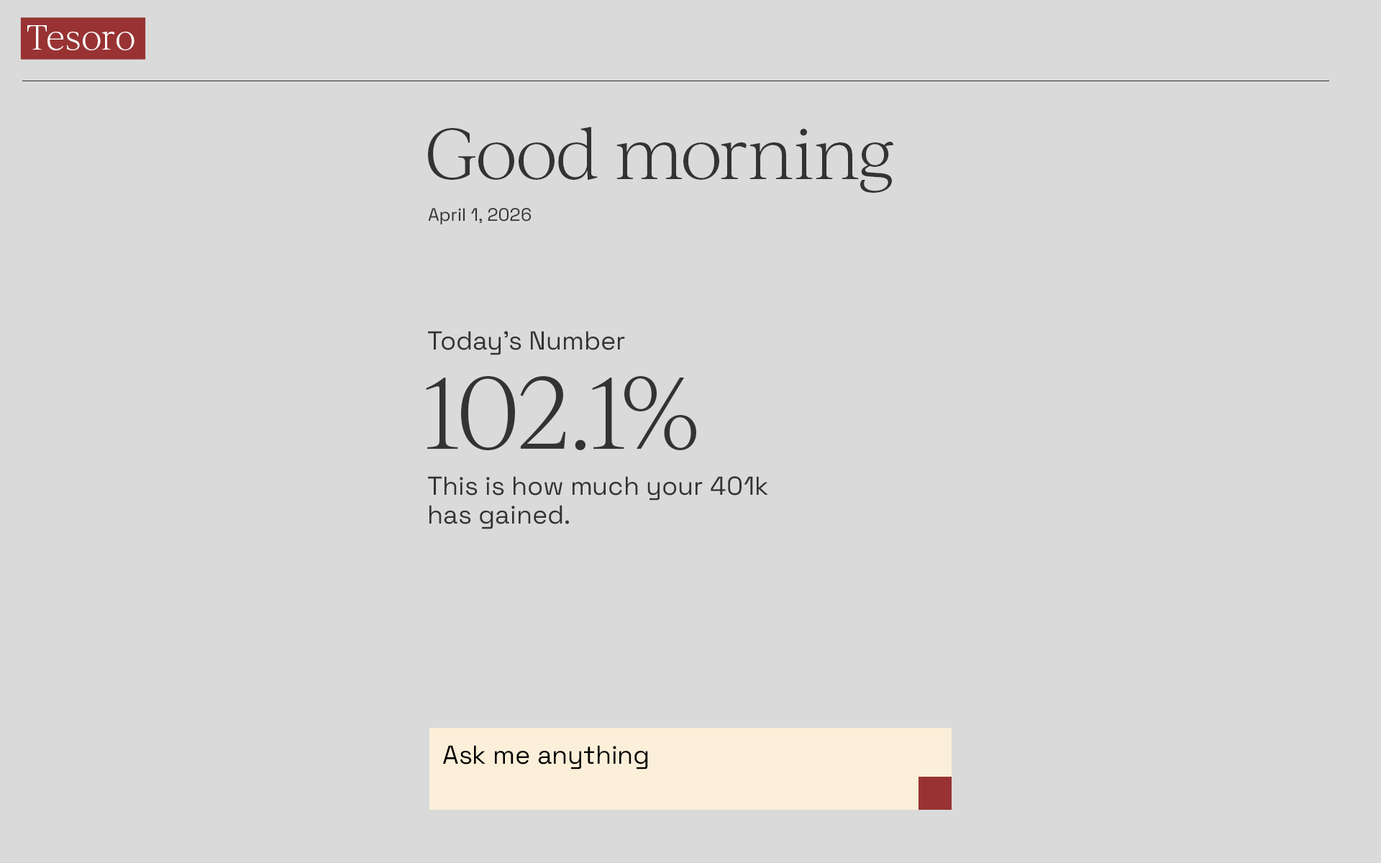
<style>
.page{position:relative;width:1381px;height:863px;background:#dadada}
.page>*{position:absolute;margin:0}
.t1{font:33.9px "IvyJournal-Light";letter-spacing:0.02em;color:#ffffff}
.t2{font:69.1px "IvyJournal-Light";letter-spacing:-0.02em;color:#333333}
.t3{font:17.9px "SpaceGrotesk-Regular";color:#333333}
.t4{font:25.9px "SpaceGrotesk-Regular";color:#333333}
.t5{font:98.2px "IvyJournal-Light";letter-spacing:-0.02em;color:#333333;text-transform:uppercase}
.t6{font:25.9px/20.3px "SpaceGrotesk-Regular";color:#333333}
.t7{font:25.9px "SpaceGrotesk-Regular";color:#000000}
</style>
<div class="page">
<p class="t1" style="left:27px;top:25px;width:108px;height:25px">Tesoro</p>
<p class="t2" style="left:428px;top:127px;width:466px;height:66px">Good morning</p>
<p class="t3" style="left:428px;top:208px;width:104px;height:17px">April 1, 2026</p>
<p class="t4" style="left:428px;top:331px;width:197px;height:24px">Today’s Number</p>
<p class="t5" style="left:426px;top:376px;width:270px;height:74px">102.1%</p>
<p class="t6" style="left:428px;top:476px;width:340px;height:53px">This is how much your 401k<br>has gained.</p>
<p class="t7" style="left:443px;top:745px;width:205px;height:25px">Ask me anything</p>
</div>
